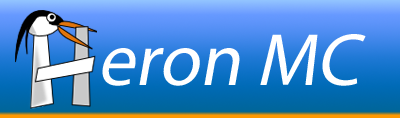
<style>
.page{position:relative;width:400px;height:122px}
.page>*{position:absolute;margin:0}
.t1{font:74.7px "MyriadPro-Regular";color:#ffffff;font-style:italic}
</style>
<div class="page">
<p class="t1" style="left:102px;top:34px;width:264px;height:52px">eron MC</p>
</div>
